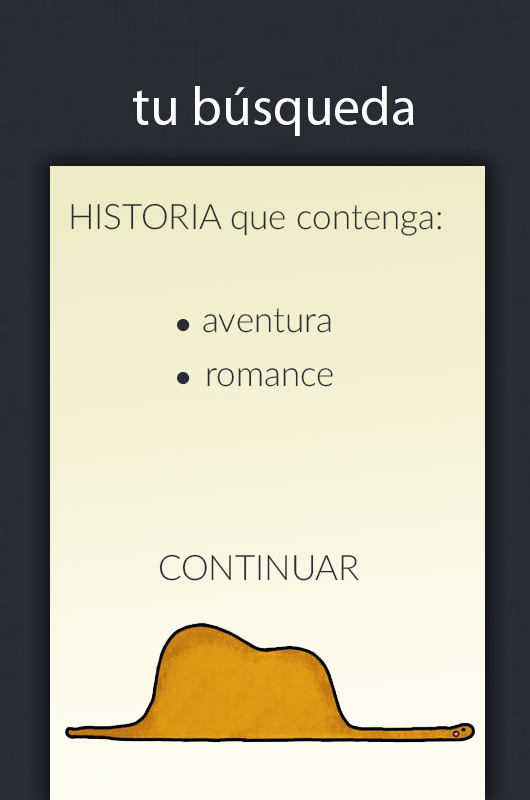
<style>
.page{position:relative;width:530px;height:800px}
.page>*{position:absolute;margin:0}
.t1{font:53.9px "MyriadPro-Regular";color:#ffffff}
.t2{font:34.9px "Lato-Light";color:#282c35}
</style>
<div class="page">
<p class="t1" style="left:133px;top:86px;width:281px;height:50px">tu búsqueda</p>
<p class="t2" style="left:71px;top:203px;width:370px;height:33px">HISTORIA que contenga:</p>
<p class="t2" style="left:203px;top:308px;width:128px;height:25px">aventura</p>
<p class="t2" style="left:207px;top:368px;width:126px;height:19px">romance</p>
<p class="t2" style="left:159px;top:554px;width:200px;height:27px">CONTINUAR</p>
</div>
